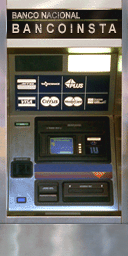
<style>
.page{position:relative;width:128px;height:256px}
.page>*{position:absolute;margin:0}
.t1{font:8.5px "ArialMT";text-transform:uppercase;font-weight:bold;scale:0.87 1}
.t2{font:12.7px "Arial-BoldMT";letter-spacing:0.3em;color:#decbba;text-transform:uppercase;scale:0.89 1}
</style>
<div class="page">
<p class="t1" style="left:12px;top:11px;width:68px;height:8px">banco nacional</p>
<p class="t2" style="left:12px;top:23px;width:105px;height:11px">bancoinsta</p>
</div>
